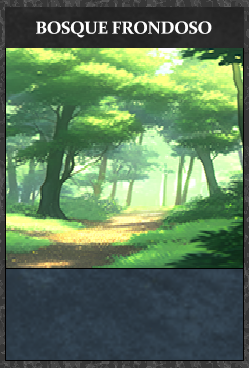
<style>
.page{position:relative;width:249px;height:368px}
.page>*{position:absolute;margin:0}
.t1{font:17.3px "Constantia-Bold";letter-spacing:-0.02em;color:#ffffff}
</style>
<div class="page">
<p class="t1" style="left:36px;top:21px;width:176px;height:17px">BOSQUE FRONDOSO</p>
</div>
